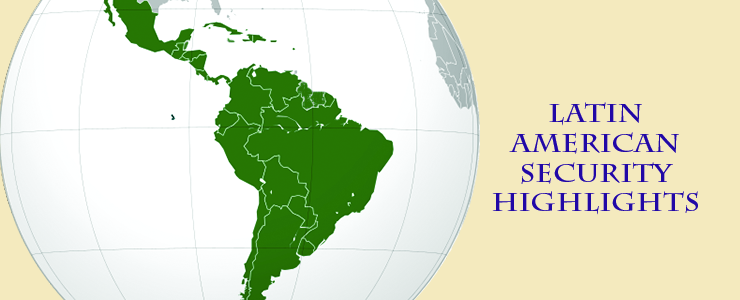
<style>
.page{position:relative;width:740px;height:300px;background:#f4eabe}
.page>*{position:absolute;margin:0}
.t1{font:24.8px "CharlemagneStd-Bold";color:#2108a6;scale:1.12 1}
</style>
<div class="page">
<p class="t1" style="left:492px;top:102px;width:206px;height:113px">Latin <br>American<br>Security<br>highlights</p>
</div>
